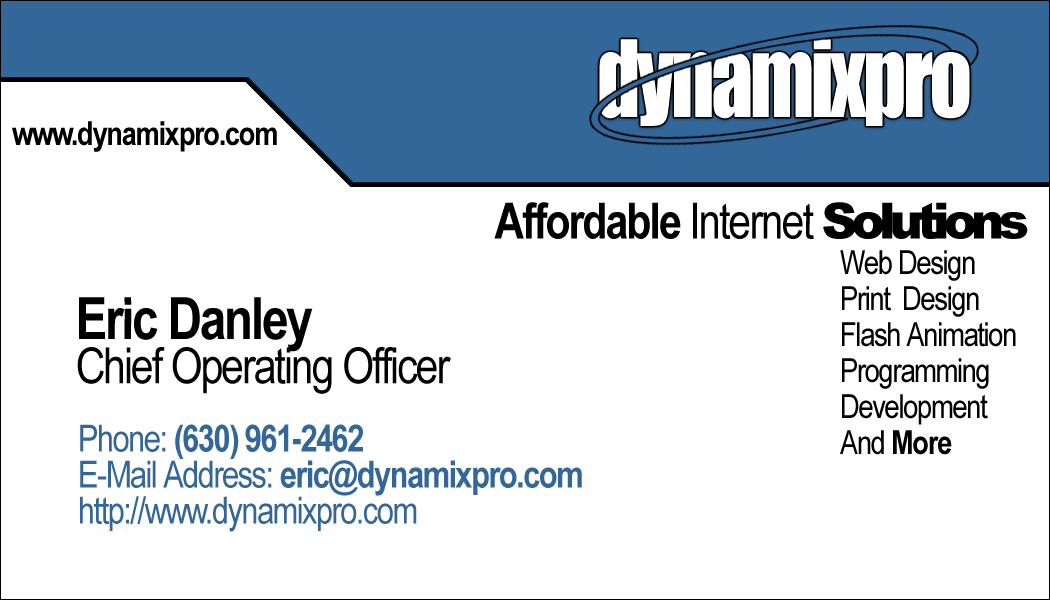
<style>
.page{position:relative;width:1050px;height:600px;background:#ffffff}
.page>*{position:absolute;margin:0}
.t1{font:98.5px "Impact";letter-spacing:-0.04em;color:#ffffff;scale:0.85 1}
.t2{font:33.3px "ArialNarrow-Bold";letter-spacing:-0.04em;color:#000000}
.t3{font:50px "ArialNarrow-Bold";letter-spacing:-0.04em;color:#000000}
.t4{font:50px "ArialNarrow";letter-spacing:-0.04em;color:#000000}
.t5{font:50px "Arial-Black";letter-spacing:-0.12em;color:#000000}
.t6{font:33.3px/36px "ArialNarrow";letter-spacing:-0.04em;color:#000000}
.t7{font:33.3px/44.4px "ArialNarrow";letter-spacing:-0.04em;color:#000000}
.t8{font:33.3px/36px "ArialNarrow-Bold";letter-spacing:-0.04em;color:#000000}
.t9{font:50px/44.4px "ArialNarrow";letter-spacing:-0.04em;color:#000000}
.t10{font:58.3px/44.4px "ArialNarrow-Bold";letter-spacing:-0.04em;color:#000000}
.t11{font:37.5px/36px "ArialNarrow";letter-spacing:-0.04em;color:#336699}
.t12{font:37.5px/36px "ArialNarrow-Bold";letter-spacing:-0.04em;color:#336699}
</style>
<div class="page">
<p class="t1" style="left:599px;top:39px;width:371px;height:87px">dynamixpro</p>
<p class="t2" style="left:12px;top:121px;width:265px;height:31px">www.dynamixpro.com</p>
<p class="t3" style="left:494px;top:202px;width:534px;height:37px">Affordable <span class="t4">Internet </span><span class="t5">Solutions</span></p>
<p class="t6" style="left:840px;top:250px;width:176px;height:205px"><span class="t7">Web Design<br></span>Print  Design<br>Flash Animation<br>Programming<br>Development<br>And <span class="t8">More</span></p>
<p class="t9" style="left:77px;top:297px;width:374px;height:97px"><span class="t10">Eric Danley<br></span>Chief Operating Officer</p>
<p class="t11" style="left:80px;top:424px;width:502px;height:108px">Phone: <span class="t12">(630) 961-2462 <br></span>E-Mail Address: <span class="t12">eric@dynamixpro.com<br></span>http://www.dynamixpro.com</p>
</div>
